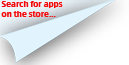
<style>
.page{position:relative;width:129px;height:65px}
.page>*{position:absolute;margin:0}
.t1{font:8px "CharcoalCY";color:#f40b0b}
</style>
<div class="page">
<p class="t1" style="left:1px;top:1px;width:62px;height:16px">Search for apps <br>on the store...</p>
</div>
